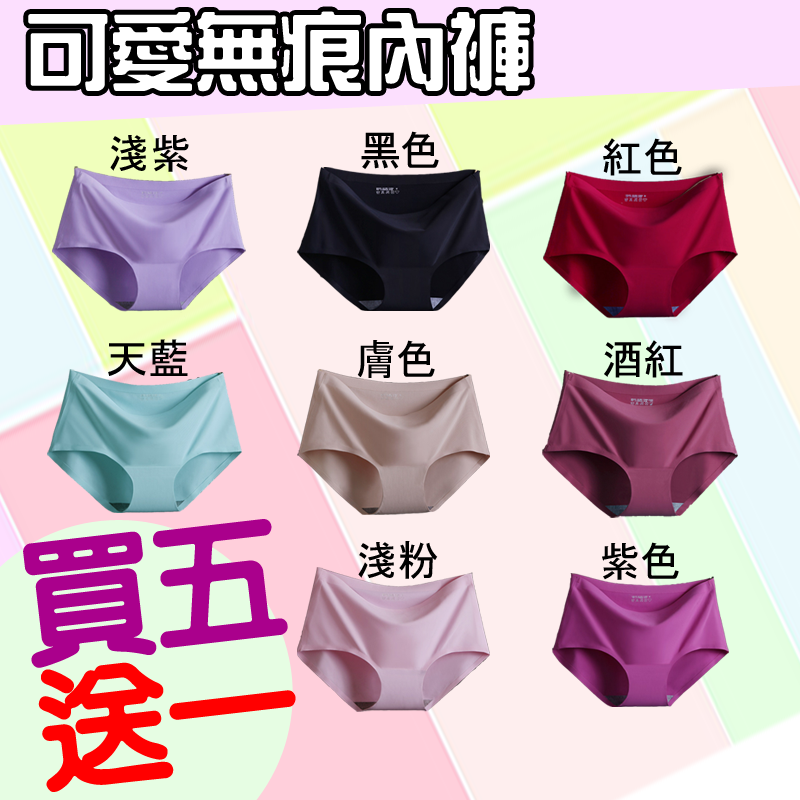
<style>
.page{position:relative;width:800px;height:800px}
.page>*{position:absolute;margin:0}
.t1{font:84.5px "HanWangZonYi";color:#ffffff}
.t2{font:41.5px "MS-Gothic";color:#000000}
.t3{font:132px "HanWangYenHeavy";color:#aa008c}
.t4{font:132px "HanWangYenHeavy";color:#ff0000}
</style>
<div class="page">
<p class="t1" style="left:28px;top:11px;width:502px;height:81px">可愛無痕內褲</p>
<p class="t2" style="left:110px;top:135px;width:79px;height:37px">淺紫</p>
<p class="t2" style="left:361px;top:131px;width:78px;height:38px">黑色</p>
<p class="t2" style="left:603px;top:138px;width:79px;height:38px">紅色</p>
<p class="t2" style="left:108px;top:339px;width:80px;height:37px">天藍</p>
<p class="t2" style="left:357px;top:340px;width:78px;height:38px">膚色</p>
<p class="t2" style="left:604px;top:340px;width:79px;height:38px">酒紅</p>
<p class="t3" style="left:23px;top:519px;width:273px;height:273px;rotate:-7deg">買五<br><span class="t4">送一</span></p>
<p class="t2" style="left:358px;top:541px;width:80px;height:38px">淺粉</p>
<p class="t2" style="left:602px;top:542px;width:77px;height:38px">紫色</p>
</div>
